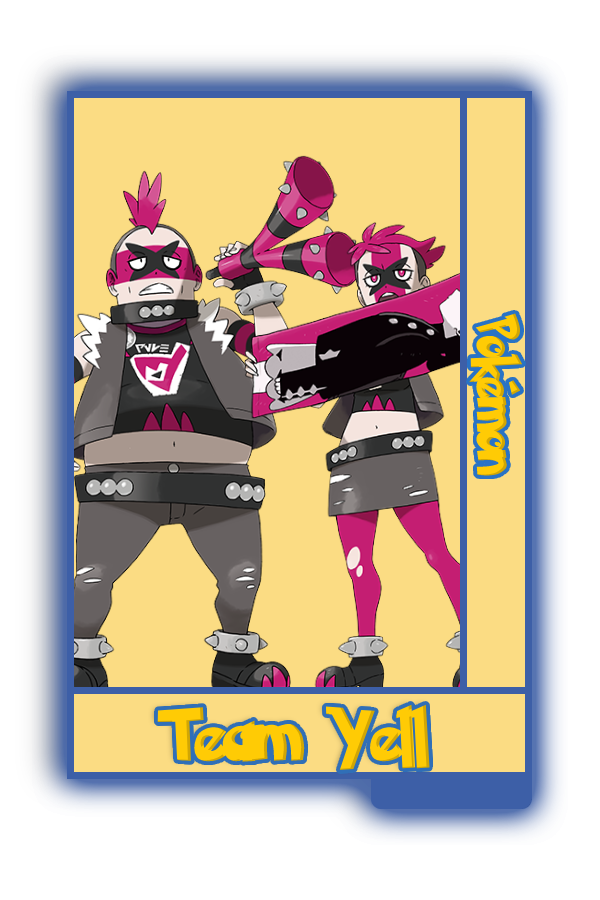
<style>
.page{position:relative;width:600px;height:900px;background:#fbdc83}
.page>*{position:absolute;margin:0}
.t1{font:48.8px "PokemonSolidNormal";color:#ffcb05;scale:0.8 1}
.t2{font:60.1px "PokemonSolidNormal";color:#ffcb05;scale:0.96 1}
</style>
<div class="page">
<p class="t1" style="left:469px;top:313px;width:54px;height:163px;rotate:90deg">Pokémon</p>
<p class="t2" style="left:157px;top:704px;width:273px;height:67px">Team Yell</p>
</div>
